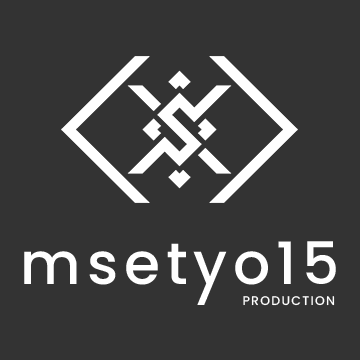
<style>
.page{position:relative;width:360px;height:360px;background:#333333}
.page>*{position:absolute;margin:0}
.t1{font:58.3px "Poppins-Medium";letter-spacing:0.1em;color:#ffffff}
.t2{font:12.5px "Poppins-Medium";letter-spacing:0.1em;color:#ffffff;text-transform:uppercase}
</style>
<div class="page">
<p class="t1" style="left:24px;top:241px;width:312px;height:58px">msetyo15</p>
<p class="t2" style="left:243px;top:296px;width:92px;height:10px">production</p>
</div>
